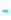
<style>
.page{position:relative;width:11px;height:20px;background:#ffffff}
.page>*{position:absolute;margin:0}
.t1{font:18px "Monofonto-Regular";color:#00ffb7}
</style>
<div class="page">
<p class="t1" style="left:2px;top:10px;width:7px;height:3px">-</p>
</div>
